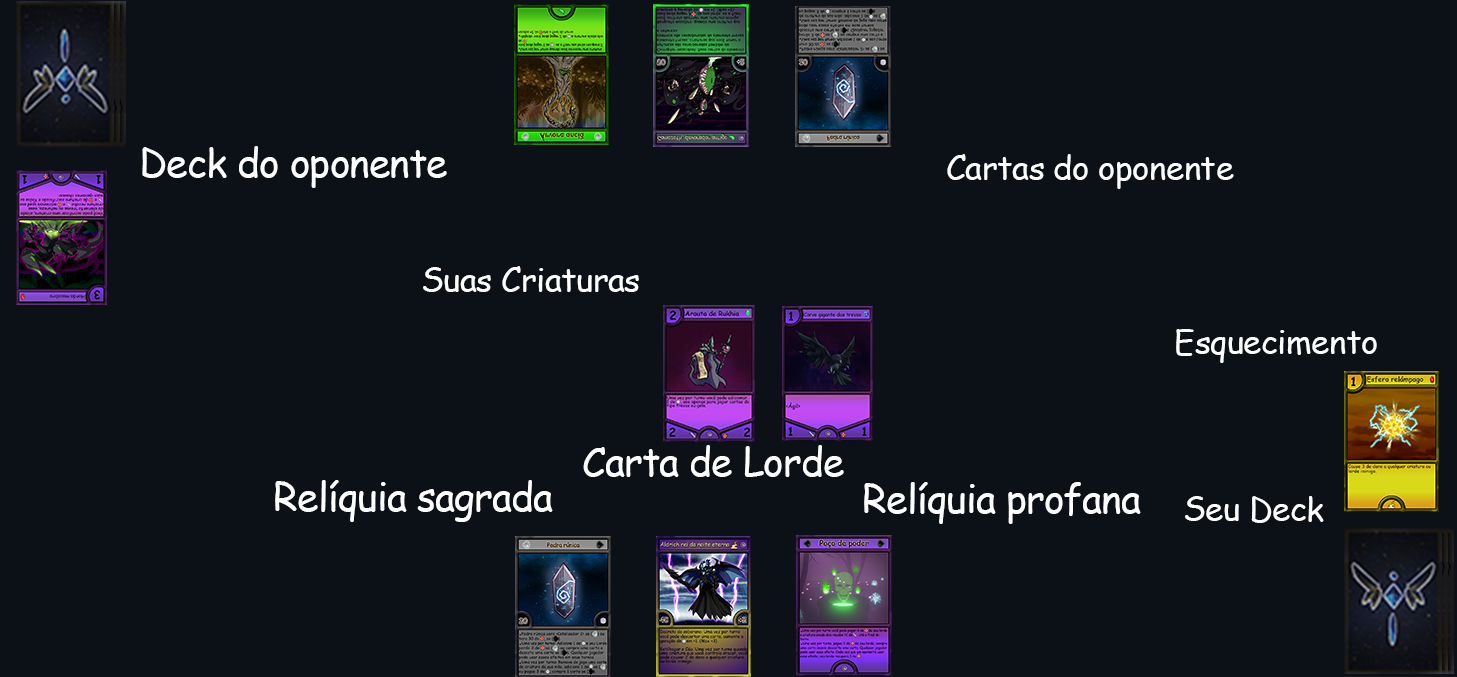
<style>
.page{position:relative;width:1457px;height:677px;background:#0b1117}
.page>*{position:absolute;margin:0}
.t1{font:38.9px "ComicSansMS";letter-spacing:-0.02em;color:#ffffff}
.t2{font:12px/20.6px "ComicSansMS";letter-spacing:-0.02em;color:#ffffff}
.t3{font:33.3px "ComicSansMS";letter-spacing:-0.02em;color:#ffffff}
</style>
<div class="page">
<p class="t1" style="left:142px;top:146px;width:305px;height:42px">Deck do oponente</p>
<p class="t2" style="left:947px;top:154px;width:287px;height:35px">Cartas do oponente</p>
<p class="t2" style="left:423px;top:266px;width:216px;height:26px">Suas Criaturas</p>
<p class="t3" style="left:1176px;top:329px;width:201px;height:34px">Esquecimento</p>
<p class="t1" style="left:583px;top:445px;width:261px;height:32px">Carta de Lorde</p>
<p class="t1" style="left:275px;top:480px;width:278px;height:42px">Relíquia sagrada</p>
<p class="t1" style="left:864px;top:482px;width:277px;height:42px">Relíquia profana</p>
<p class="t3" style="left:1185px;top:496px;width:139px;height:27px">Seu Deck</p>
</div>
